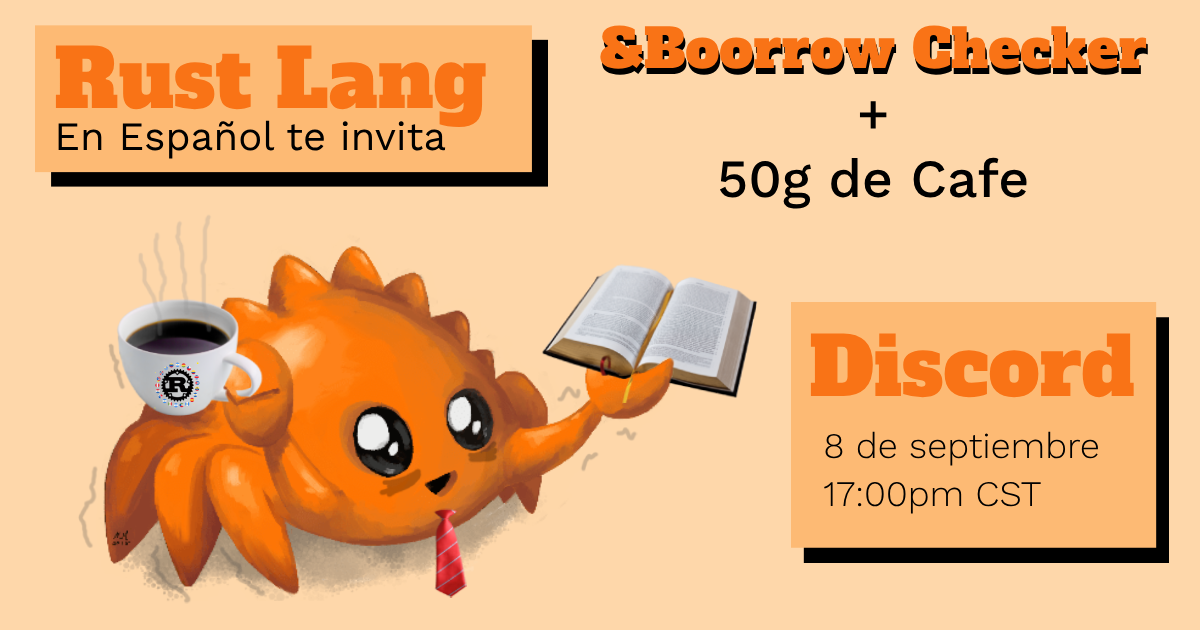
<style>
.page{position:relative;width:1200px;height:630px;background:#fed7aa}
.page>*{position:absolute;margin:0}
.t1{font:53.6px "AlfaSlabOne-Regular";color:#f97316}
.t2{font:53.6px "WorkSans-Medium";color:#000000}
.t3{font:53.6px "AlfaSlabOne-Regular"}
.t4{font:80.4px "AlfaSlabOne-Regular";color:#f97316}
.t5{font:40.2px "WorkSans-Regular";color:#000000}
.t6{font:36px "WorkSans-Light";color:#000000}
</style>
<div class="page">
<p class="t1" style="left:600px;top:25px;width:547px;height:184px;text-align:center">&amp;Boorrow Checker<br><span class="t2">+<br>50g de Cafe</span></p>
<p class="t3" style="left:602px;top:31px;width:546px;height:44px">&amp;Boorrow Checker</p>
<p class="t4" style="left:55px;top:45px;width:431px;height:82px">Rust Lang</p>
<p class="t5" style="left:58px;top:120px;width:388px;height:39px">En Español te invita</p>
<p class="t4" style="left:810px;top:333px;width:324px;height:65px">Discord</p>
<p class="t6" style="left:825px;top:431px;width:273px;height:35px">8 de septiembre</p>
<p class="t6" style="left:824px;top:481px;width:217px;height:33px">17:00pm CST</p>
</div>
